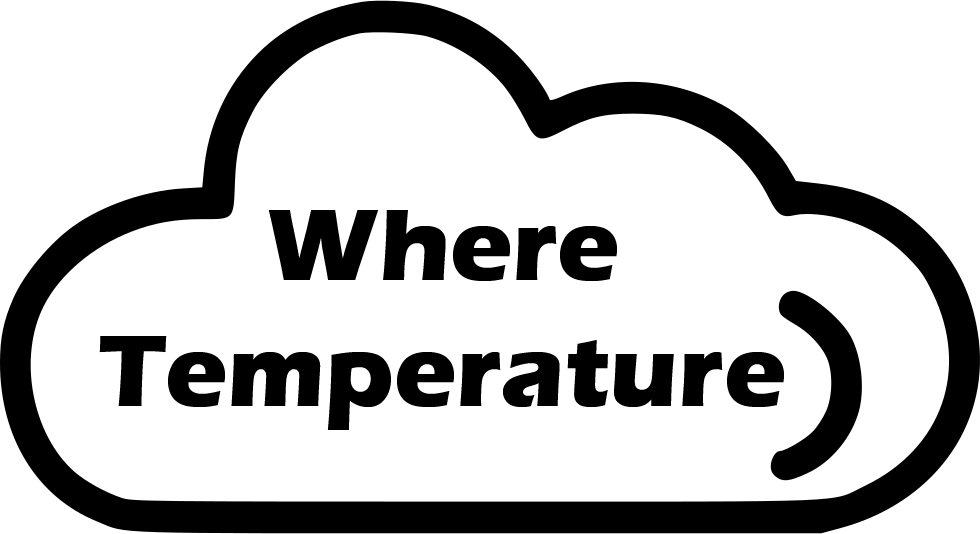
<style>
.page{position:relative;width:980px;height:534px;background:#ffffff}
.page>*{position:absolute;margin:0}
.t1{font:105px "ErasITC-Bold";color:#000000}
</style>
<div class="page">
<p class="t1" style="left:99px;top:210px;width:685px;height:220px;text-align:center">Where<br>Temperature</p>
</div>
